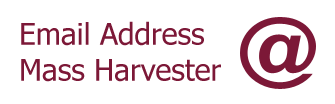
<style>
.page{position:relative;width:335px;height:104px;background:#ffffff}
.page>*{position:absolute;margin:0}
.t1{font:30px "Tahoma";color:#7c1837}
</style>
<div class="page">
<p class="t1" style="left:21px;top:21px;width:200px;height:61px">Email Address Mass Harvester</p>
</div>
